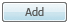
<style>
.page{position:relative;width:68px;height:24px}
.page>*{position:absolute;margin:0}
.t1{font:11px "Tahoma";color:#555655}
</style>
<div class="page">
<p class="t1" style="left:25px;top:7px;width:19px;height:9px">Add</p>
</div>
